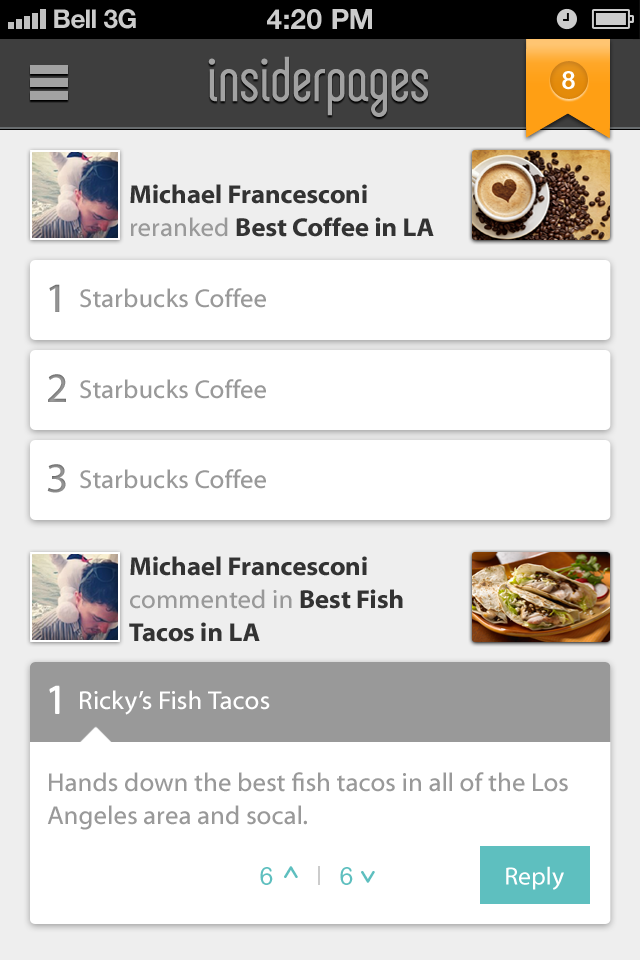
<style>
.page{position:relative;width:640px;height:960px;background:#ffffff}
.page>*{position:absolute;margin:0}
.t1{font:26px "HelveticaNeue-Bold";color:#cccccc}
.t2{font:26px "HelveticaNeue-Bold";color:#cccccc;text-transform:uppercase}
.t3{font:28px "HelveticaNeue-Bold";color:#cccccc;text-transform:uppercase}
.t4{font:25px "ArialRoundedMT-Bold";color:#ffffff}
.t5{font:26px/33px "MyriadWebPro-Bold";color:#333333}
.t6{font:26px/33px "MyriadWebPro";color:#999999}
.t7{font:42px "MyriadWebPro";color:#919191}
.t8{font:26px "MyriadWebPro";color:#999999}
.t9{font:42px "MyriadWebPro";color:#8b8b8b}
.t10{font:42px "MyriadWebPro";color:#ffffff}
.t11{font:26px "MyriadWebPro";color:#ffffff}
.t12{font:25px "ArialRoundedMT";letter-spacing:0.005em;color:#5ebfbf}
.t13{font:24.9px "Comfortaa-Bold";letter-spacing:0.005em;color:#5ebfbf}
.t14{font:25px "MyriadWebPro";color:#ffffff}
</style>
<div class="page">
<p class="t1" style="left:54px;top:9px;width:42px;height:20px">Bell</p>
<p class="t2" style="left:104px;top:9px;width:32px;height:20px">3G</p>
<p class="t3" style="left:267px;top:9px;width:105px;height:21px">4:20 pM</p>
<p class="t4" style="left:562px;top:71px;width:13px;height:19px">8</p>
<p class="t5" style="left:130px;top:184px;width:304px;height:53px">Michael Francesconi<span class="t6"> <br>reranked </span>Best Coffee in LA</p>
<p class="t7" style="left:49px;top:284px;width:11px;height:28px">1</p>
<p class="t8" style="left:80px;top:288px;width:186px;height:20px">Starbucks Coffee</p>
<p class="t9" style="left:48px;top:374px;width:18px;height:28px">2</p>
<p class="t8" style="left:80px;top:379px;width:186px;height:20px">Starbucks Coffee</p>
<p class="t9" style="left:47px;top:464px;width:19px;height:29px">3</p>
<p class="t8" style="left:80px;top:469px;width:186px;height:20px">Starbucks Coffee</p>
<p class="t5" style="left:129px;top:556px;width:274px;height:86px">Michael Francesconi <br><span class="t6">commented in </span>Best Fish <br>Tacos in LA</p>
<p class="t10" style="left:49px;top:685px;width:11px;height:28px">1</p>
<p class="t11" style="left:80px;top:690px;width:190px;height:25px">Ricky’s Fish Tacos</p>
<p class="t6" style="left:47px;top:772px;width:521px;height:58px">Hands down the best fish tacos in all of the Los <br>Angeles area and socal.</p>
<p class="t12" style="left:260px;top:867px;width:13px;height:18px">6</p>
<p class="t13" style="left:284px;top:866px;width:14px;height:12px;rotate:-90deg">&gt;</p>
<p class="t12" style="left:340px;top:867px;width:13px;height:18px">6</p>
<p class="t14" style="left:506px;top:866px;width:58px;height:24px">Reply</p>
<p class="t13" style="left:361px;top:871px;width:14px;height:12px;rotate:90deg">&gt;</p>
</div>
